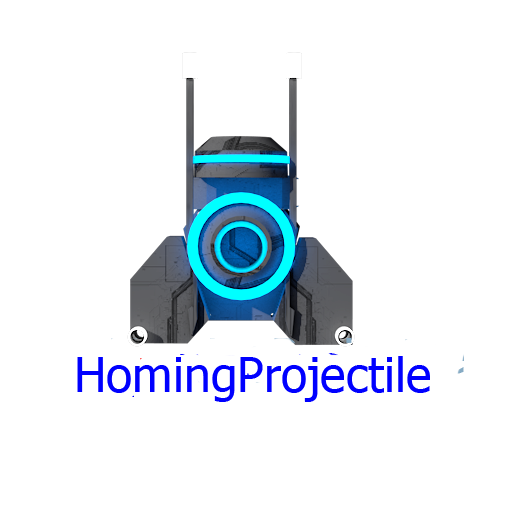
<style>
.page{position:relative;width:512px;height:512px;background:#ffffff}
.page>*{position:absolute;margin:0}
.t1{font:48px "Tahoma";color:#0000ff}
</style>
<div class="page">
<p class="t1" style="left:77px;top:356px;width:353px;height:46px">HomingProjectile</p>
</div>
